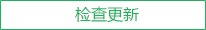
<style>
.page{position:relative;width:206px;height:30px;background:#ffffff}
.page>*{position:absolute;margin:0}
.t1{font:16px "MicrosoftYaHei";color:#25ae60}
</style>
<div class="page">
<p class="t1" style="left:75px;top:6px;width:64px;height:17px">检查更新</p>
</div>
